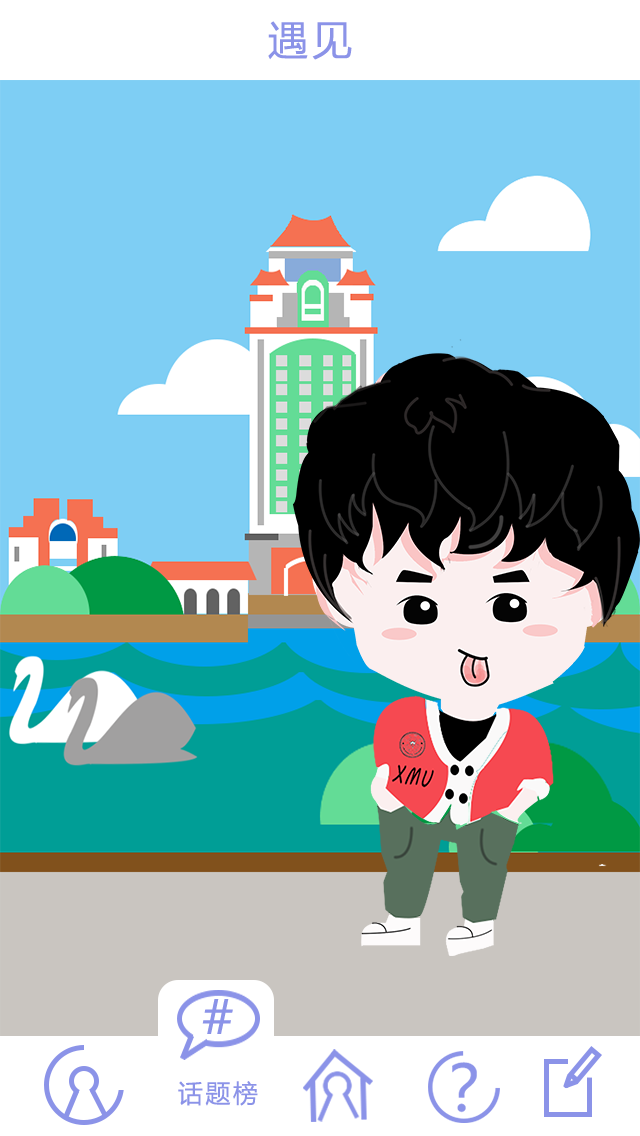
<style>
.page{position:relative;width:640px;height:1136px;background:#7ecef4}
.page>*{position:absolute;margin:0}
.t1{font:40px "MicrosoftYaHei";letter-spacing:0.1em;color:#8b93e8}
.t2{font:25px "MicrosoftYaHei";letter-spacing:0.1em;color:#8b93e8}
</style>
<div class="page">
<p class="t1" style="left:268px;top:21px;width:84px;height:39px">遇见</p>
<p class="t2" style="left:178px;top:1081px;width:80px;height:25px">话题榜</p>
</div>
